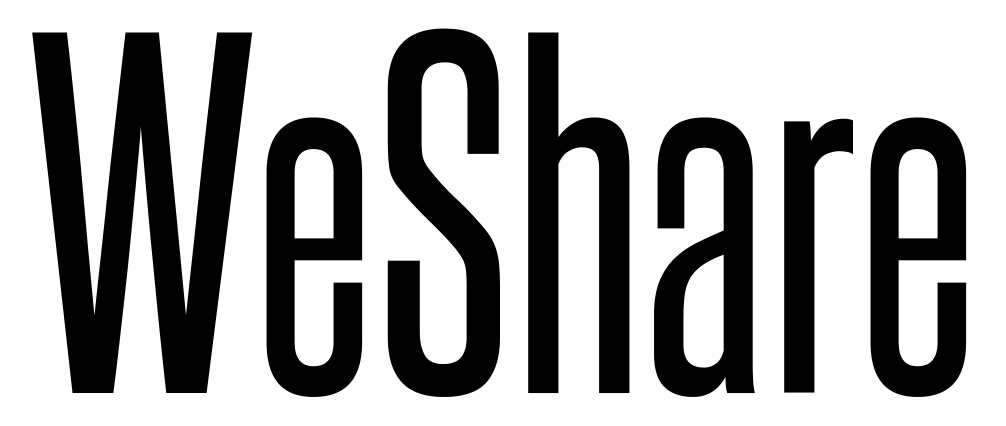
<style>
.page{position:relative;width:1006px;height:426px;background:#ffffff}
.page>*{position:absolute;margin:0}
.t1{font:438px "SteelfishRg-Regular";color:#000000}
</style>
<div class="page">
<p class="t1" style="left:32px;top:28px;width:935px;height:369px">WeShare</p>
</div>
